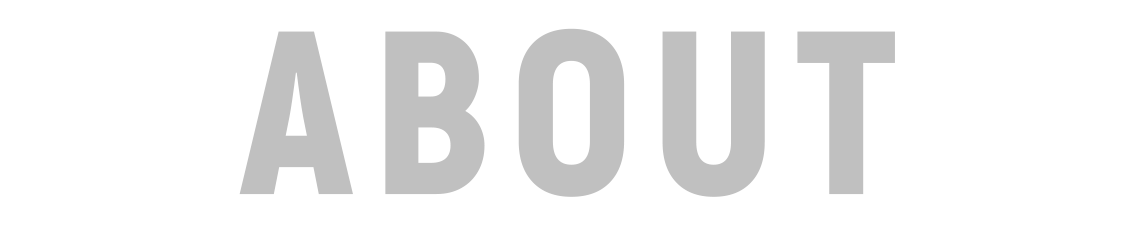
<style>
.page{position:relative;width:1129px;height:230px;background:#ffffff}
.page>*{position:absolute;margin:0}
.t1{font:232px "Akrobat-Black";letter-spacing:0.075em;color:#c0c0c0}
</style>
<div class="page">
<p class="t1" style="left:239px;top:28px;width:656px;height:169px">ABOUT</p>
</div>
